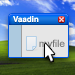
<style>
.page{position:relative;width:75px;height:75px}
.page>*{position:absolute;margin:0}
.t1{font:8px "Helvetica-Bold";color:#ffffff}
.t2{font:10px "ArialUnicodeMS";color:#737373}
</style>
<div class="page">
<p class="t1" style="left:13px;top:16px;width:26px;height:7px">Vaadin</p>
<p class="t2" style="left:39px;top:39px;width:26px;height:10px">myfile</p>
</div>
